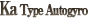
<style>
.page{position:relative;width:88px;height:19px;background:#ffffff}
.page>*{position:absolute;margin:0}
.t1{font:14px "RyuminPro-ExBold";letter-spacing:-0.13em;color:#4a3f32;font-weight:bold;scale:0.8 1}
.t2{font:18px "RyuminPro-ExBold";letter-spacing:-0.13em;color:#4a3f32;font-weight:bold;scale:0.8 1}
</style>
<div class="page">
<p class="t1" style="left:0px;top:1px;width:88px;height:17px"><span class="t2">Ka </span>Type Autogyro</p>
</div>
